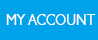
<style>
.page{position:relative;width:98px;height:40px;background:#00a2e9}
.page>*{position:absolute;margin:0}
.t1{font:15.8px "Humanist521BT-Roman";color:#fefefe;scale:0.86 1}
</style>
<div class="page">
<p class="t1" style="left:6px;top:14px;width:90px;height:11px">MY ACCOUNT</p>
</div>
